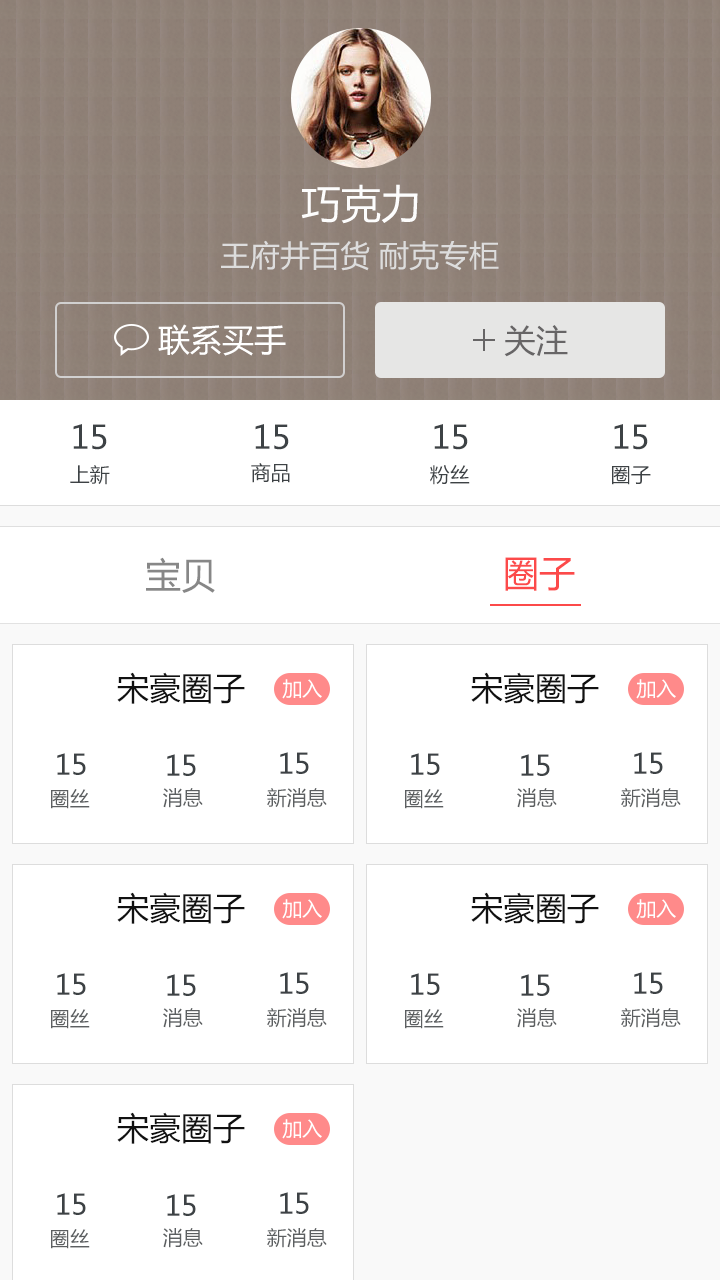
<style>
.page{position:relative;width:720px;height:1280px;background:#ffffff}
.page>*{position:absolute;margin:0}
.t1{font:40px "MicrosoftYaHei";color:#fdfdfd}
.t2{font:30px "MicrosoftYaHei";color:#dddddd}
.t3{font:32px "MicrosoftYaHei";color:#ffffff}
.t4{font:32px "MicrosoftYaHei";color:#676566}
.t5{font:32px "MicrosoftYaHei";color:#3d4245}
.t6{font:20px "MicrosoftYaHei";color:#3d4245}
.t7{font:36px "MicrosoftYaHei";color:#878787}
.t8{font:36px "MicrosoftYaHei";color:#fc4a4a}
.t9{font:32px "MicrosoftYaHei";color:#111111}
.t10{font:20px "MicrosoftYaHei";color:#ffffff}
.t11{font:28px "MicrosoftYaHei";color:#3d4245}
.t12{font:20px "MicrosoftYaHei";color:#5c5f61}
</style>
<div class="page">
<p class="t1" style="left:301px;top:184px;width:117px;height:40px">巧克力</p>
<p class="t2" style="left:221px;top:240px;width:278px;height:31px">王府井百货 耐克专柜</p>
<p class="t3" style="left:158px;top:324px;width:128px;height:32px">联系买手</p>
<p class="t4" style="left:504px;top:325px;width:64px;height:32px">关注</p>
<p class="t5" style="left:73px;top:424px;width:34px;height:26px">15</p>
<p class="t5" style="left:255px;top:424px;width:34px;height:26px">15</p>
<p class="t5" style="left:434px;top:424px;width:34px;height:26px">15</p>
<p class="t5" style="left:614px;top:424px;width:34px;height:26px">15</p>
<p class="t6" style="left:70px;top:465px;width:40px;height:20px">上新</p>
<p class="t6" style="left:251px;top:463px;width:39px;height:20px">商品</p>
<p class="t6" style="left:430px;top:465px;width:40px;height:20px">粉丝</p>
<p class="t6" style="left:612px;top:466px;width:39px;height:19px">圈子</p>
<p class="t7" style="left:146px;top:557px;width:69px;height:36px">宝贝</p>
<p class="t8" style="left:505px;top:557px;width:70px;height:34px">圈子</p>
<p class="t9" style="left:117px;top:672px;width:128px;height:32px">宋豪圈子</p>
<p class="t9" style="left:471px;top:672px;width:128px;height:32px">宋豪圈子</p>
<p class="t10" style="left:282px;top:679px;width:40px;height:20px">加入</p>
<p class="t10" style="left:636px;top:679px;width:40px;height:20px">加入</p>
<p class="t11" style="left:57px;top:753px;width:29px;height:22px">15</p>
<p class="t11" style="left:167px;top:754px;width:29px;height:22px">15</p>
<p class="t11" style="left:280px;top:752px;width:29px;height:22px">15</p>
<p class="t11" style="left:411px;top:753px;width:29px;height:22px">15</p>
<p class="t11" style="left:521px;top:754px;width:29px;height:22px">15</p>
<p class="t11" style="left:634px;top:752px;width:29px;height:22px">15</p>
<p class="t12" style="left:51px;top:789px;width:39px;height:20px">圈丝</p>
<p class="t12" style="left:163px;top:788px;width:40px;height:20px">消息</p>
<p class="t12" style="left:267px;top:788px;width:60px;height:20px">新消息</p>
<p class="t12" style="left:405px;top:789px;width:39px;height:20px">圈丝</p>
<p class="t12" style="left:517px;top:788px;width:40px;height:20px">消息</p>
<p class="t12" style="left:621px;top:788px;width:60px;height:20px">新消息</p>
<p class="t9" style="left:117px;top:892px;width:128px;height:32px">宋豪圈子</p>
<p class="t9" style="left:471px;top:892px;width:128px;height:32px">宋豪圈子</p>
<p class="t10" style="left:282px;top:899px;width:40px;height:20px">加入</p>
<p class="t10" style="left:636px;top:899px;width:40px;height:20px">加入</p>
<p class="t11" style="left:57px;top:973px;width:29px;height:22px">15</p>
<p class="t11" style="left:167px;top:974px;width:29px;height:22px">15</p>
<p class="t11" style="left:280px;top:972px;width:29px;height:22px">15</p>
<p class="t11" style="left:411px;top:973px;width:29px;height:22px">15</p>
<p class="t11" style="left:521px;top:974px;width:29px;height:22px">15</p>
<p class="t11" style="left:634px;top:972px;width:29px;height:22px">15</p>
<p class="t12" style="left:51px;top:1009px;width:39px;height:20px">圈丝</p>
<p class="t12" style="left:163px;top:1008px;width:40px;height:20px">消息</p>
<p class="t12" style="left:267px;top:1008px;width:60px;height:20px">新消息</p>
<p class="t12" style="left:405px;top:1009px;width:39px;height:20px">圈丝</p>
<p class="t12" style="left:517px;top:1008px;width:40px;height:20px">消息</p>
<p class="t12" style="left:621px;top:1008px;width:60px;height:20px">新消息</p>
<p class="t9" style="left:117px;top:1112px;width:128px;height:32px">宋豪圈子</p>
<p class="t10" style="left:282px;top:1119px;width:40px;height:20px">加入</p>
<p class="t11" style="left:57px;top:1193px;width:29px;height:22px">15</p>
<p class="t11" style="left:280px;top:1192px;width:29px;height:22px">15</p>
<p class="t11" style="left:167px;top:1194px;width:29px;height:22px">15</p>
<p class="t12" style="left:51px;top:1229px;width:39px;height:20px">圈丝</p>
<p class="t12" style="left:163px;top:1228px;width:40px;height:20px">消息</p>
<p class="t12" style="left:267px;top:1228px;width:60px;height:20px">新消息</p>
</div>
